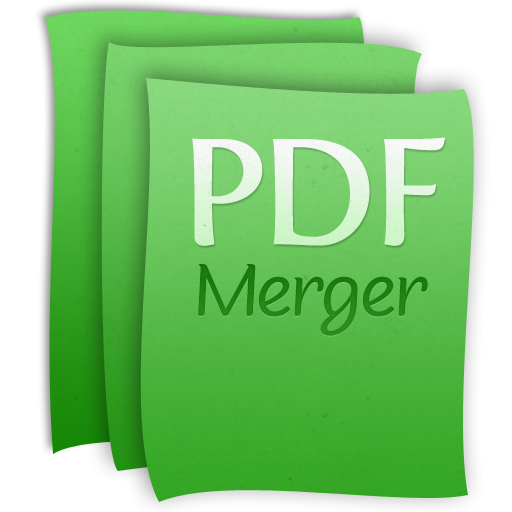
<style>
.page{position:relative;width:512px;height:512px}
.page>*{position:absolute;margin:0}
.t1{font:150px "FertigoPro-Regular";letter-spacing:-0.05em;color:#e5f6e2}
.t2{font:72px "SovbaRegular";color:#1f8012}
</style>
<div class="page">
<p class="t1" style="left:192px;top:137px;width:253px;height:109px">PDF</p>
<p class="t2" style="left:198px;top:264px;width:230px;height:72px">Merger</p>
</div>
